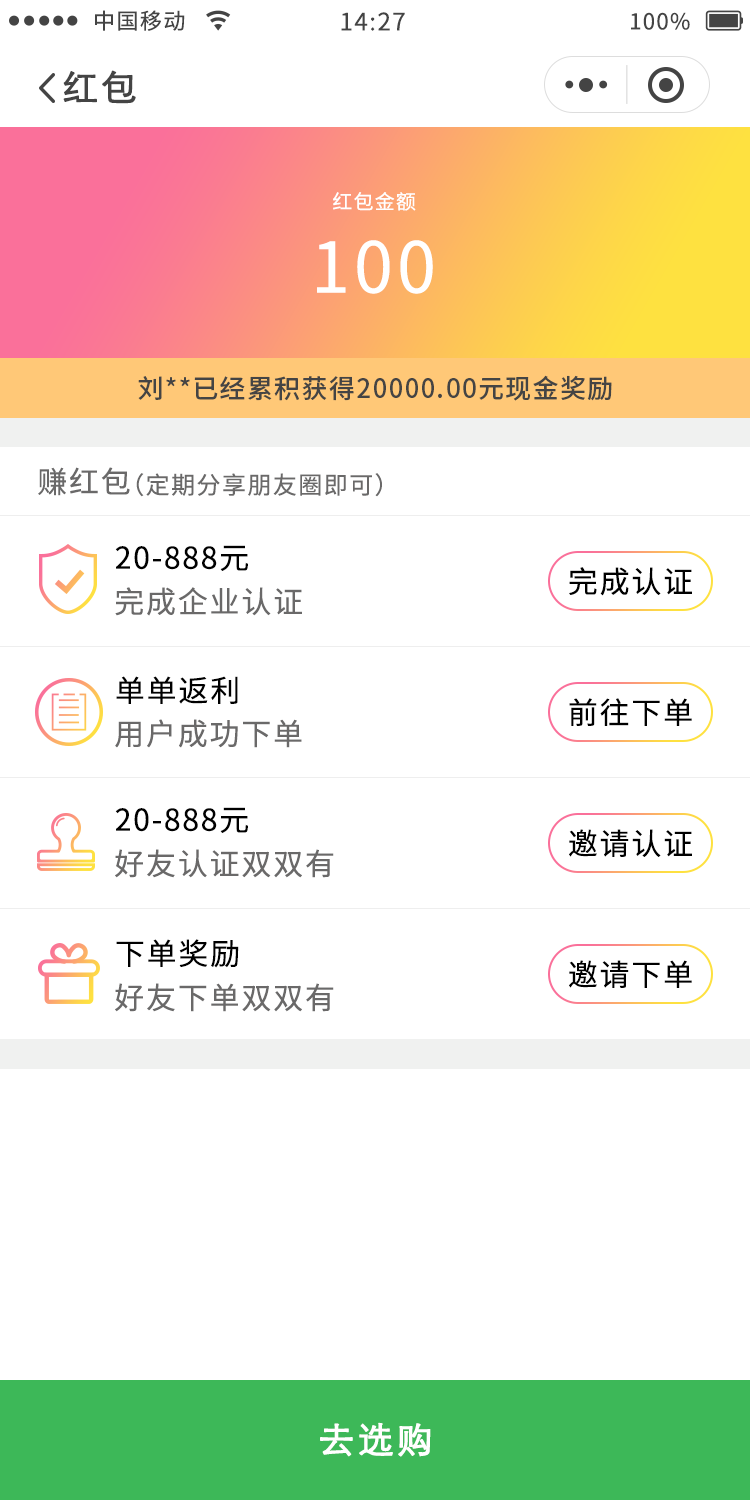
<style>
.page{position:relative;width:750px;height:1500px;background:#ffffff}
.page>*{position:absolute;margin:0}
.t1{font:22px "NotoSansCJKsc-Regular";letter-spacing:0.06em;color:#444444}
.t2{font:24px "NotoSansCJKsc-Regular";letter-spacing:0.06em;color:#444444}
.t3{font:36px "STXihei";letter-spacing:0.06em;color:#444444;font-weight:bold}
.t4{font:20px "NotoSansCJKsc-Regular";letter-spacing:0.06em;color:#ffffff}
.t5{font:70px "NotoSansCJKsc-Regular";letter-spacing:0.06em;color:#ffffff}
.t6{font:26px "SourceHanSansSC-Medium";letter-spacing:0.05em;color:#444444}
.t7{font:30px "NotoSansCJKsc-Regular";letter-spacing:0.06em;color:#6a6969}
.t8{font:24px "NotoSansCJKsc-Regular";letter-spacing:0.06em;color:#6a6969}
.t9{font:30px "NotoSansCJKsc-Regular";letter-spacing:0.06em;color:#000000}
.t10{font:36px "STXihei";letter-spacing:0.06em;color:#ffffff;font-weight:bold}
</style>
<div class="page">
<p class="t1" style="left:95px;top:10px;width:90px;height:21px">中国移动</p>
<p class="t2" style="left:341px;top:12px;width:64px;height:19px">14:27</p>
<p class="t1" style="left:631px;top:12px;width:59px;height:18px">100%</p>
<p class="t3" style="left:63px;top:70px;width:73px;height:34px">红包</p>
<p class="t4" style="left:333px;top:192px;width:83px;height:19px">红包金额</p>
<p class="t5" style="left:317px;top:240px;width:116px;height:54px">100</p>
<p class="t6" style="left:138px;top:375px;width:474px;height:26px">刘**已经累积获得20000.00元现金奖励</p>
<p class="t7" style="left:38px;top:467px;width:92px;height:29px">赚红包</p>
<p class="t8" style="left:136px;top:473px;width:246px;height:24px">（定期分享朋友圈即可）</p>
<p class="t9" style="left:115px;top:545px;width:133px;height:26px">20-888元</p>
<p class="t9" style="left:569px;top:567px;width:123px;height:29px">完成认证</p>
<p class="t7" style="left:115px;top:587px;width:187px;height:29px">完成企业认证</p>
<p class="t9" style="left:116px;top:676px;width:122px;height:28px">单单返利</p>
<p class="t9" style="left:569px;top:698px;width:123px;height:28px">前往下单</p>
<p class="t7" style="left:115px;top:719px;width:187px;height:29px">用户成功下单</p>
<p class="t9" style="left:115px;top:807px;width:133px;height:26px">20-888元</p>
<p class="t9" style="left:569px;top:829px;width:123px;height:28px">邀请认证</p>
<p class="t7" style="left:115px;top:849px;width:219px;height:29px">好友认证双双有</p>
<p class="t9" style="left:116px;top:939px;width:123px;height:29px">下单奖励</p>
<p class="t9" style="left:569px;top:960px;width:123px;height:28px">邀请下单</p>
<p class="t7" style="left:115px;top:983px;width:219px;height:29px">好友下单双双有</p>
<p class="t10" style="left:320px;top:1422px;width:111px;height:35px">去选购</p>
</div>
